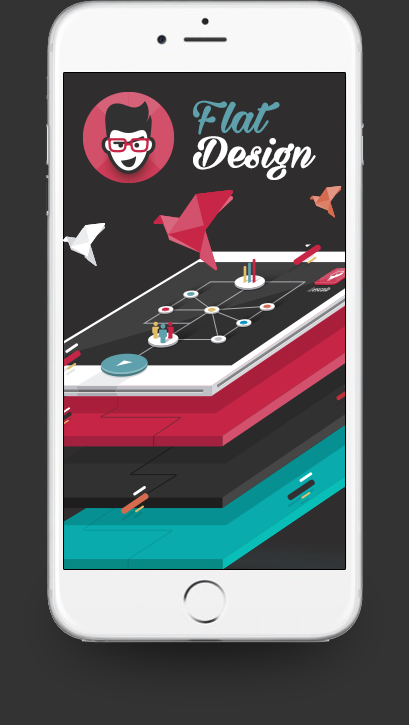
<style>
.page{position:relative;width:409px;height:725px;background:#333333}
.page>*{position:absolute;margin:0}
.t1{font:50px/35px "MilasianCircaBoldPERSONAL";color:#ffffff}
.t2{font:50px/35px "MilasianCircaBoldPERSONAL";color:#5ea1ac}
</style>
<div class="page">
<p class="t1" style="left:193px;top:100px;width:123px;height:80px"><span class="t2">Flat <br></span>Design</p>
</div>
